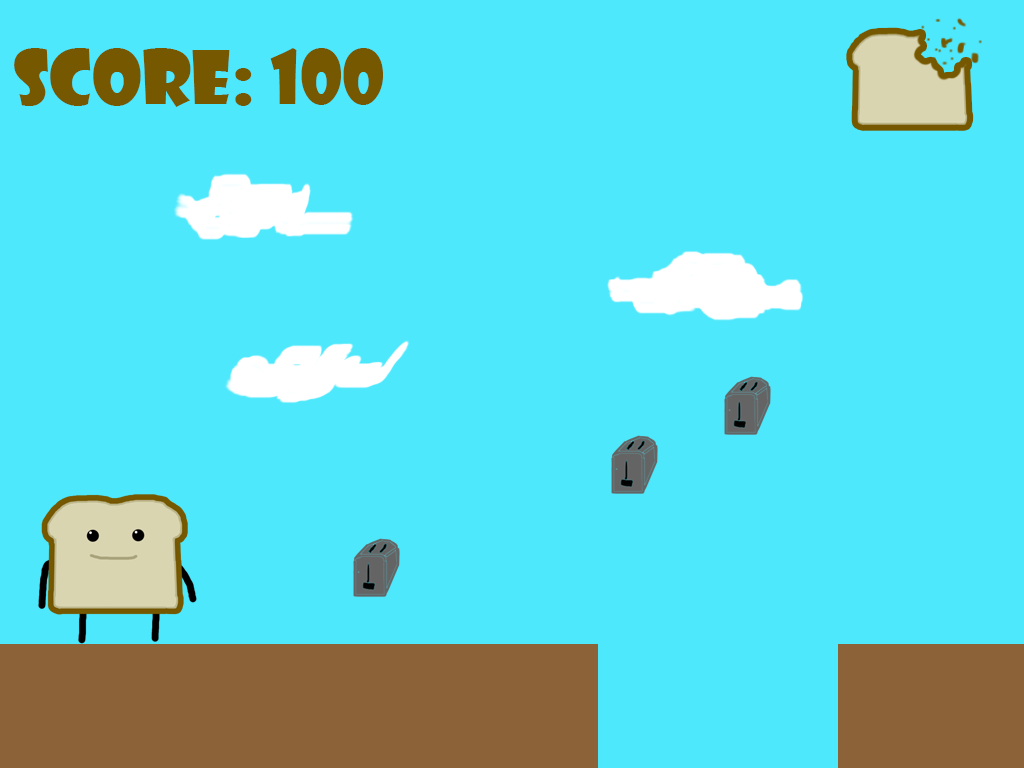
<style>
.page{position:relative;width:1024px;height:768px;background:#4ee8fc}
.page>*{position:absolute;margin:0}
.t1{font:72px "ShowcardGothic-Reg";color:#755800}
</style>
<div class="page">
<p class="t1" style="left:14px;top:48px;width:369px;height:59px">SCORE: 100</p>
</div>
